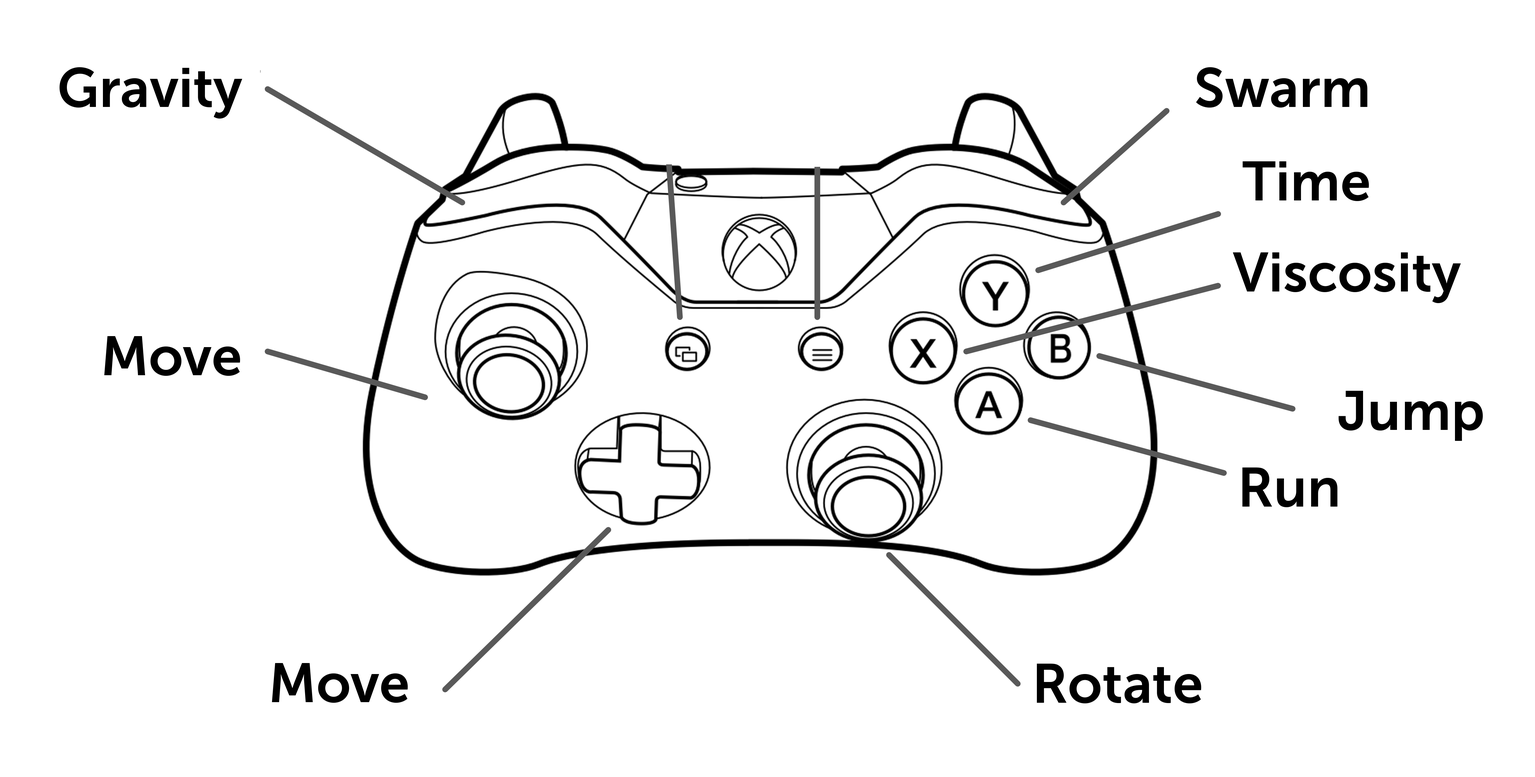
<style>
.page{position:relative;width:1535px;height:777px;background:#ffffff}
.page>*{position:absolute;margin:0}
.t1{font:55px "MuseoSans-700";color:#000000}
</style>
<div class="page">
<p class="t1" style="left:60px;top:67px;width:182px;height:52px">Gravity</p>
<p class="t1" style="left:1196px;top:67px;width:171px;height:41px">Swarm</p>
<p class="t1" style="left:1243px;top:161px;width:126px;height:40px">Time</p>
<p class="t1" style="left:1233px;top:252px;width:228px;height:51px">Viscosity</p>
<p class="t1" style="left:104px;top:336px;width:136px;height:40px">Move</p>
<p class="t1" style="left:1339px;top:391px;width:144px;height:50px">Jump</p>
<p class="t1" style="left:1243px;top:467px;width:95px;height:40px">Run</p>
<p class="t1" style="left:272px;top:663px;width:136px;height:40px">Move</p>
<p class="t1" style="left:1037px;top:663px;width:164px;height:40px">Rotate</p>
</div>
